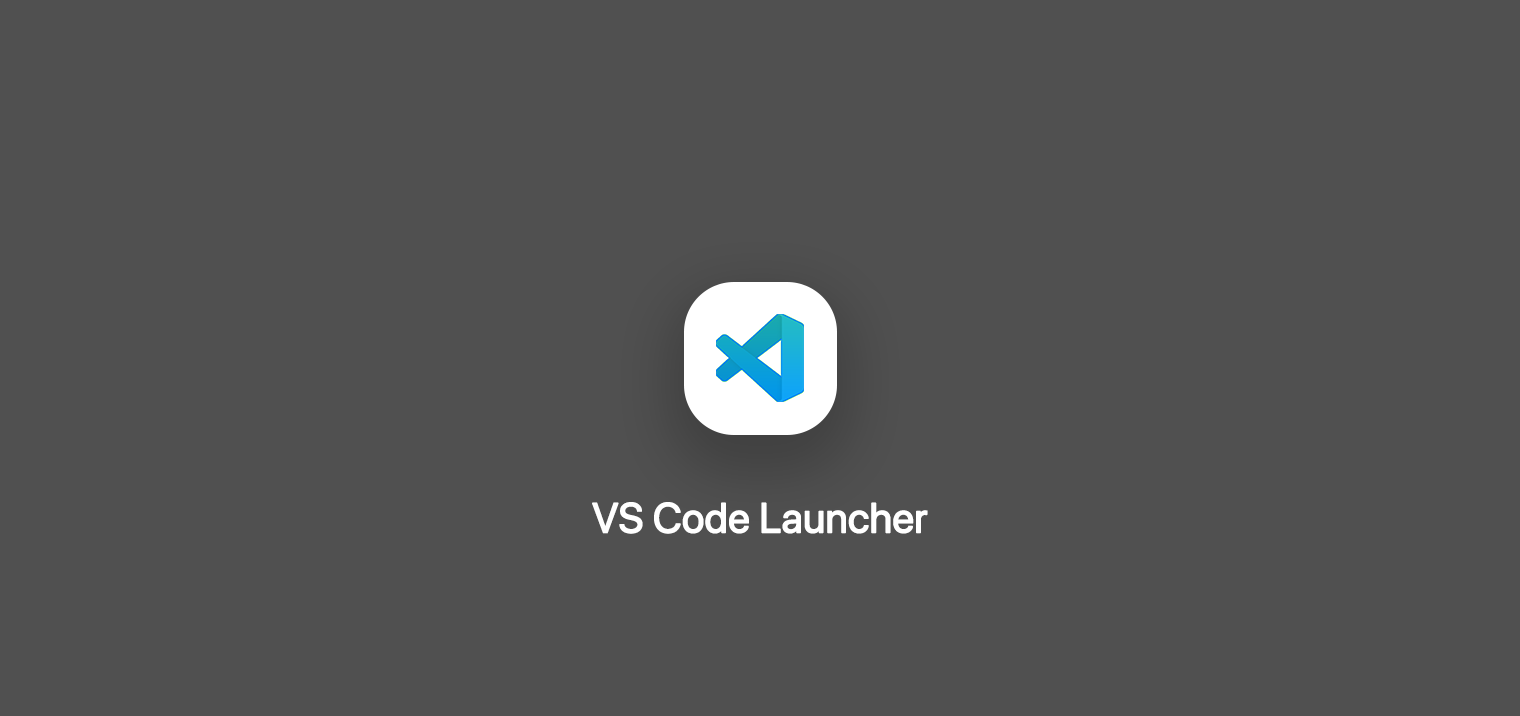
<style>
.page{position:relative;width:1520px;height:716px;background:#505050}
.page>*{position:absolute;margin:0}
.t1{font:41.7px "SFProDisplay-Regular";color:#ffffff;font-weight:bold}
</style>
<div class="page">
<p class="t1" style="left:592px;top:502px;width:336px;height:32px">VS Code Launcher</p>
</div>
